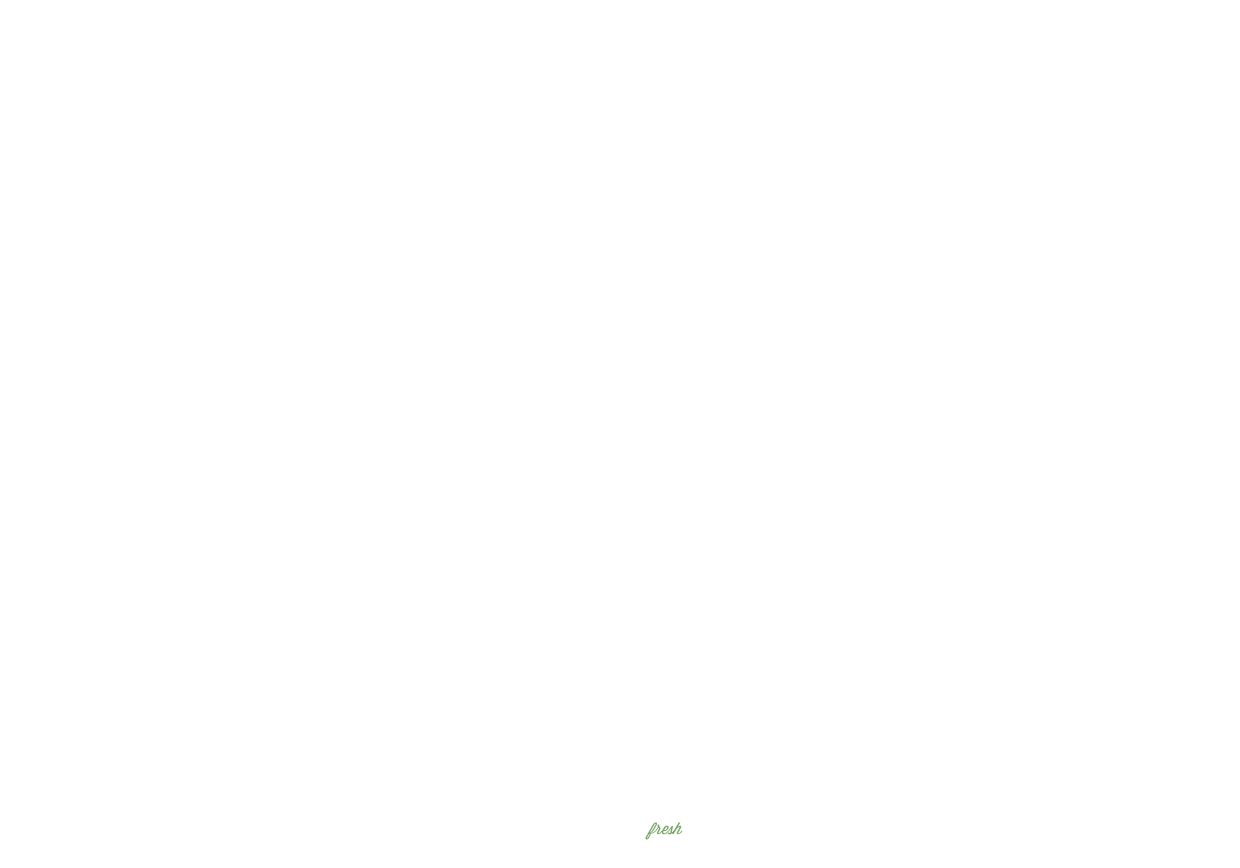
<style>
.page{position:relative;width:1240px;height:868px;background:#ffffff}
.page>*{position:absolute;margin:0}
.t1{font:16px "Wisdom-Script";color:#77a466}
</style>
<div class="page">
<p class="t1" style="left:645px;top:822px;width:38px;height:18px">fresh</p>
</div>
